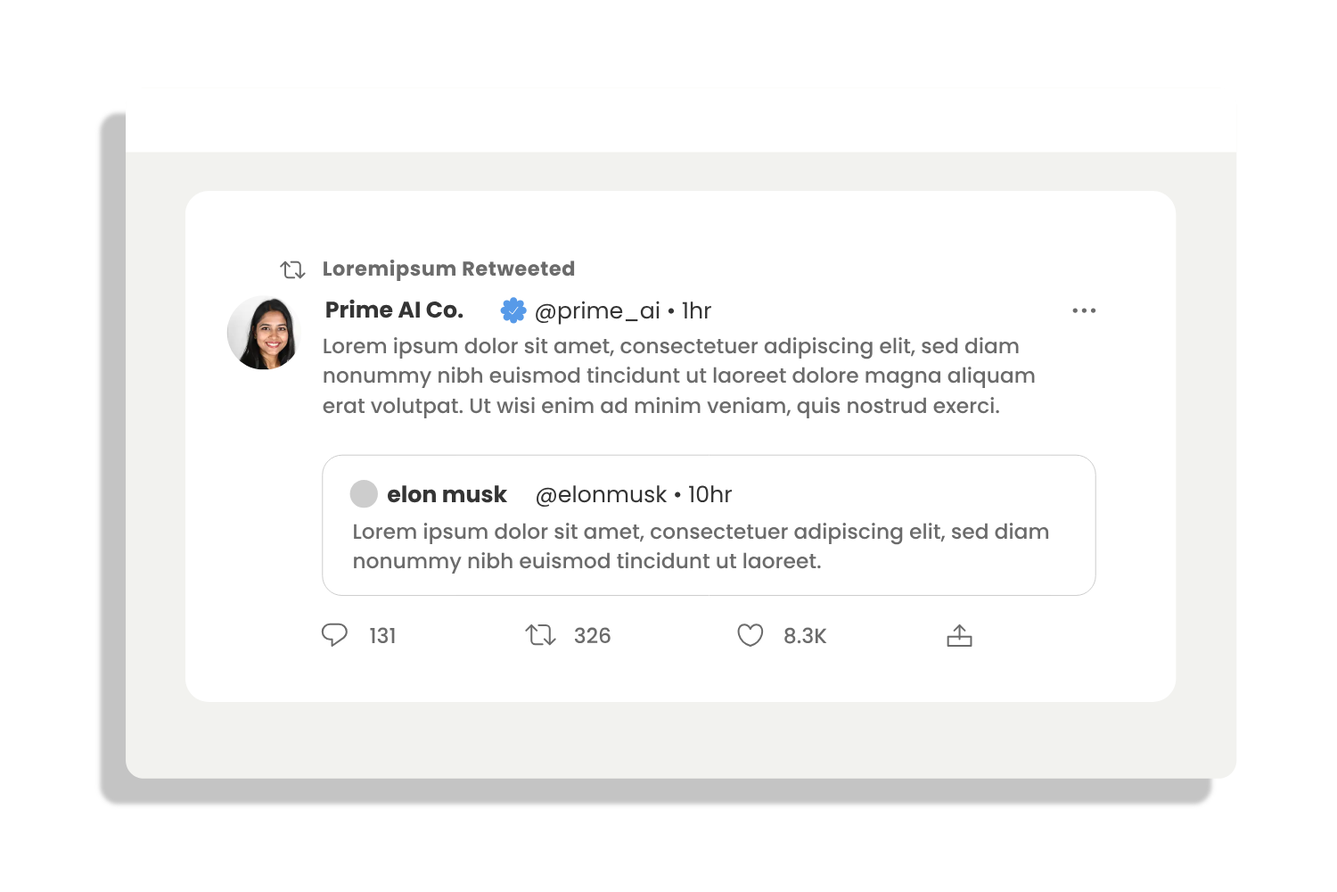
<style>
.page{position:relative;width:1337px;height:892px;background:#ffffff}
.page>*{position:absolute;margin:0}
.t1{font:20px "Poppins-Bold";letter-spacing:0.025em;color:#6b6b6b}
.t2{font:22.5px "Poppins-Bold";color:#343434}
.t3{font:22.5px "Poppins-Regular";color:#343434}
.t4{font:20.8px/29.7px "Poppins-Medium";color:#6b6b6b}
.t5{font:20.8px "Poppins-Medium";color:#6b6b6b}
</style>
<div class="page">
<p class="t1" style="left:324px;top:259px;width:251px;height:22px">Loremipsum Retweeted</p>
<p class="t2" style="left:326px;top:299px;width:138px;height:19px">Prime AI Co.</p>
<p class="t3" style="left:536px;top:300px;width:175px;height:25px">@prime_ai • 1hr</p>
<p class="t4" style="left:323px;top:337px;width:712px;height:81px">Lorem ipsum dolor sit amet, consectetuer adipiscing elit, sed diam nonummy nibh euismod tincidunt ut laoreet dolore magna aliquam erat volutpat. Ut wisi enim ad minim veniam, quis nostrud exerci.</p>
<p class="t2" style="left:388px;top:485px;width:119px;height:18px">elon musk</p>
<p class="t3" style="left:537px;top:485px;width:195px;height:21px">@elonmusk • 10hr</p>
<p class="t4" style="left:354px;top:522px;width:695px;height:51px">Lorem ipsum dolor sit amet, consectetuer adipiscing elit, sed diam nonummy nibh euismod tincidunt ut laoreet.</p>
<p class="t5" style="left:370px;top:627px;width:25px;height:16px">131</p>
<p class="t5" style="left:574px;top:627px;width:37px;height:16px">326</p>
<p class="t5" style="left:785px;top:627px;width:42px;height:17px">8.3K</p>
</div>
